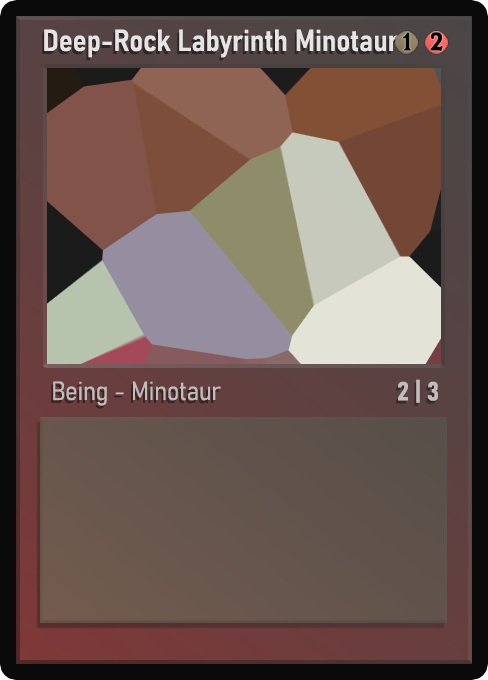
<style>
.page{position:relative;width:488px;height:680px}
.page>*{position:absolute;margin:0}
.t1{font:30px "Bahnschrift-SemiBoldSemiCondensed";color:#f2f2f2;font-weight:bold}
.t2{font:25px "WTRRoycroft";color:#000000;font-weight:bold;scale:1.09 1}
.t3{font:26px "Bahnschrift-LightSemiCondensed";color:#c8c8c8;font-weight:bold}
.t4{font:26px "Bahnschrift-BoldSemiCondensed";color:#c1bdbd;font-weight:bold}
</style>
<div class="page">
<p class="t1" style="left:44px;top:29px;width:355px;height:29px;opacity:0.9">Deep-Rock Labyrinth Minotaur</p>
<p class="t2" style="left:403px;top:32px;width:8px;height:19px">1</p>
<p class="t2" style="left:430px;top:32px;width:13px;height:19px">2</p>
<p class="t3" style="left:53px;top:381px;width:168px;height:25px;opacity:0.9">Being - Minotaur</p>
<p class="t4" style="left:398px;top:379px;width:40px;height:24px">2 | 3</p>
</div>
